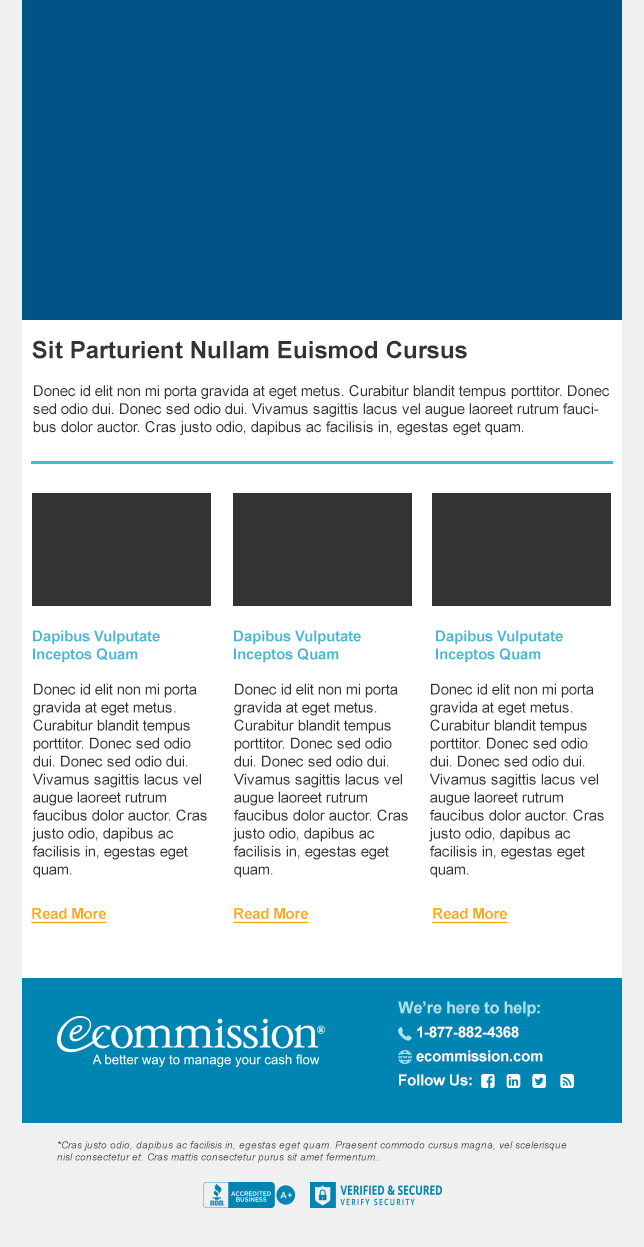
<style>
.page{position:relative;width:644px;height:1247px;background:#ffffff}
.page>*{position:absolute;margin:0}
.t1{font:24px "Arial-BoldMT";color:#333333}
.t2{font:15px "ArialMT";color:#333333}
.t3{font:15px "Arial-BoldMT";color:#46b7d5}
.t4{font:15px "Arial-BoldMT";color:#fba919;text-decoration:underline}
.t5{font:16.3px "Arial-BoldMT";color:#abe0ed}
.t6{font:15px "Arial-BoldMT";color:#ffffff}
.t7{font:10px "Arial-ItalicMT";color:#333333}
</style>
<div class="page">
<p class="t1" style="left:32px;top:340px;width:435px;height:19px">Sit Parturient Nullam Euismod Cursus</p>
<p class="t2" style="left:33px;top:385px;width:577px;height:50px">Donec id elit non mi porta gravida at eget metus. Curabitur blandit tempus porttitor. Donec sed odio dui. Donec sed odio dui. Vivamus sagittis lacus vel augue laoreet rutrum faucibus dolor auctor. Cras justo odio, dapibus ac facilisis in, egestas eget quam.</p>
<p class="t3" style="left:33px;top:630px;width:127px;height:33px">Dapibus Vulputate<br>Inceptos Quam</p>
<p class="t3" style="left:234px;top:630px;width:127px;height:33px">Dapibus Vulputate<br>Inceptos Quam</p>
<p class="t3" style="left:436px;top:630px;width:127px;height:33px">Dapibus Vulputate<br>Inceptos Quam</p>
<p class="t2" style="left:32px;top:683px;width:175px;height:195px">Donec id elit non mi porta gravida at eget metus. Curabitur blandit tempus porttitor. Donec sed odio dui. Donec sed odio dui. Vivamus sagittis lacus vel augue laoreet rutrum faucibus dolor auctor. Cras justo odio, dapibus ac facilisis in, egestas eget quam.</p>
<p class="t2" style="left:233px;top:683px;width:175px;height:195px">Donec id elit non mi porta gravida at eget metus. Curabitur blandit tempus porttitor. Donec sed odio dui. Donec sed odio dui. Vivamus sagittis lacus vel augue laoreet rutrum faucibus dolor auctor. Cras justo odio, dapibus ac facilisis in, egestas eget quam.</p>
<p class="t2" style="left:429px;top:683px;width:175px;height:195px">Donec id elit non mi porta gravida at eget metus. Curabitur blandit tempus porttitor. Donec sed odio dui. Donec sed odio dui. Vivamus sagittis lacus vel augue laoreet rutrum faucibus dolor auctor. Cras justo odio, dapibus ac facilisis in, egestas eget quam.</p>
<p class="t4" style="left:31px;top:908px;width:76px;height:16px">Read More</p>
<p class="t4" style="left:233px;top:908px;width:76px;height:16px">Read More</p>
<p class="t4" style="left:432px;top:908px;width:76px;height:16px">Read More</p>
<p class="t5" style="left:398px;top:1001px;width:142px;height:16px">We’re here to help:</p>
<p class="t6" style="left:417px;top:1026px;width:102px;height:12px">1-877-882-4368</p>
<p class="t6" style="left:416px;top:1050px;width:127px;height:12px">ecommission.com</p>
<p class="t6" style="left:399px;top:1074px;width:73px;height:12px">Follow Us:</p>
<p class="t7" style="left:57px;top:1141px;width:510px;height:22px">*Cras justo odio, dapibus ac facilisis in, egestas eget quam. Praesent commodo cursus magna, vel scelerisque nisl consectetur et. Cras mattis consectetur purus sit amet fermentum..</p>
</div>
